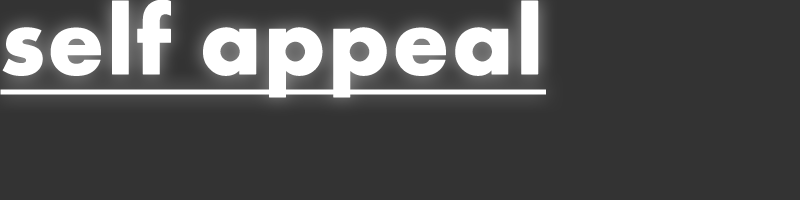
<style>
.page{position:relative;width:800px;height:200px;background:#333333}
.page>*{position:absolute;margin:0}
.t1{font:100px "FuturaPT-Bold";color:#ffffff;font-weight:bold;text-decoration:underline}
</style>
<div class="page">
<p class="t1" style="left:0px;top:0px;width:546px;height:98px">self appeal</p>
</div>
